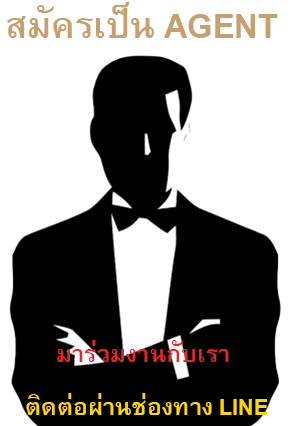
<style>
.page{position:relative;width:291px;height:426px;background:#ffffff}
.page>*{position:absolute;margin:0}
.t1{font:50px "BrowalliaNew-Bold";color:#c6a06f;text-transform:uppercase}
.t2{font:33.3px "BrowalliaNew-Bold";color:#ffd700;text-transform:uppercase}
</style>
<div class="page">
<p class="t1" style="left:6px;top:2px;width:272px;height:36px">สมัครเป็น Agent</p>
<p class="t2" style="left:26px;top:393px;width:242px;height:22px">ติดต่อผ่านช่องทาง LINE</p>
</div>
